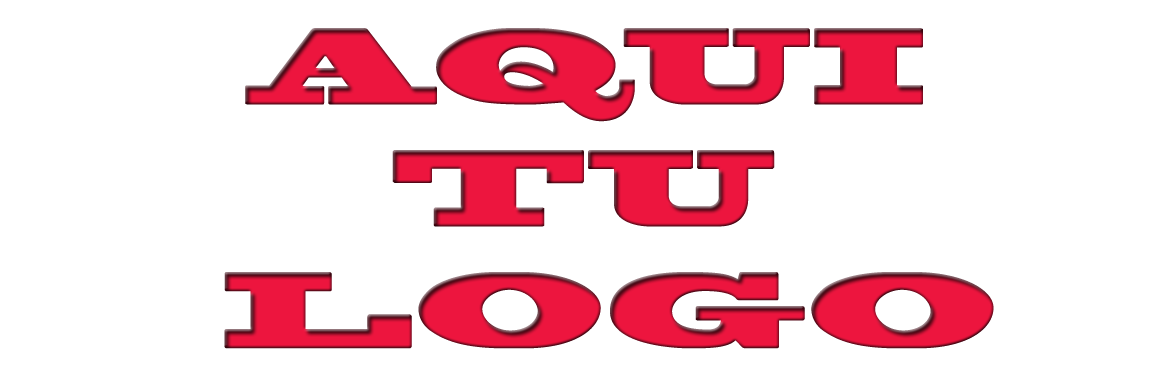
<style>
.page{position:relative;width:1153px;height:379px;background:#ffffff}
.page>*{position:absolute;margin:0}
.t1{font:101.6px "BlackoakStd";color:#ed153e;scale:1.06 1}
</style>
<div class="page">
<p class="t1" style="left:224px;top:28px;width:770px;height:321px;text-align:center">AQUI <br>TU <br>LOGO</p>
</div>
